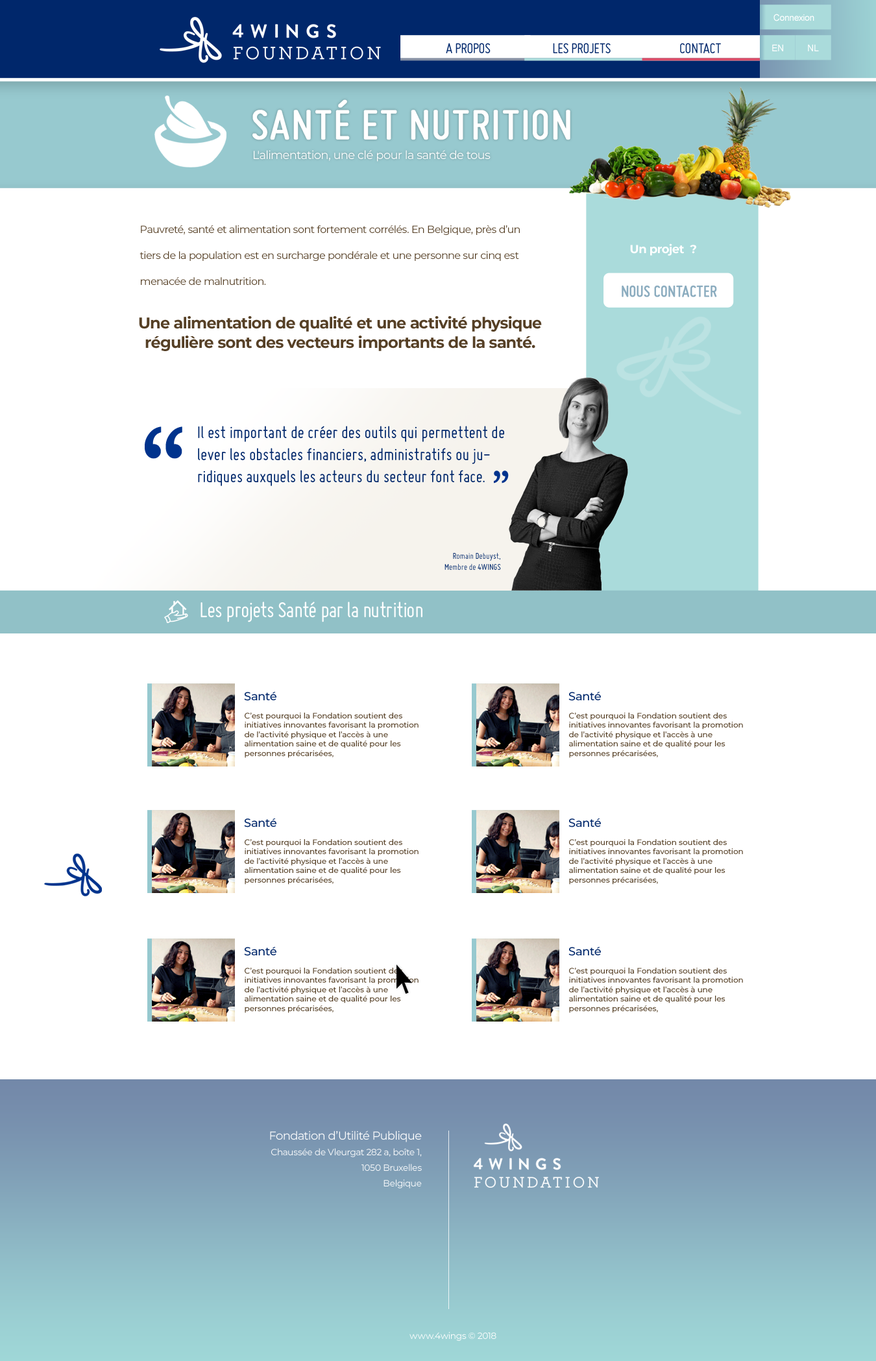
<style>
.page{position:relative;width:876px;height:1361px;background:#ffffff}
.page>*{position:absolute;margin:0}
.t1{font:9.1px "ArialMT";letter-spacing:-0.025em;color:#ffffff}
.t2{font:15.6px "Miso";letter-spacing:-0.025em;color:#00276b}
.t3{font:9.2px "ArialMT";letter-spacing:-0.025em;color:#ffffff}
.t4{font:45.4px "Miso";color:#ffffff;text-transform:uppercase;font-weight:bold}
.t5{font:11.7px "Montserrat-Regular";letter-spacing:-0.025em;color:#ffffff}
.t6{font:10.4px/26px "Montserrat-Regular";letter-spacing:-0.025em;color:#564026}
.t7{font:11.7px "Montserrat-Bold";letter-spacing:-0.025em;color:#ffffff}
.t8{font:17.3px "Miso";letter-spacing:-0.025em;color:#8bacbf;font-weight:bold}
.t9{font:15.6px/19.5px "Montserrat-Bold";letter-spacing:-0.025em;color:#564026}
.t10{font:18.2px "Miso";color:#00276b}
.t11{font:89.2px "Monaco";letter-spacing:-0.025em;color:#00338d}
.t12{font:34.5px "Monaco";letter-spacing:-0.025em;color:#00338d}
.t13{font:9.1px "Miso";color:#00276b}
.t14{font:23.4px "Miso";letter-spacing:-0.025em;color:#ffffff}
.t15{font:11.6px "Montserrat-Medium";color:#00276b}
.t16{font:7.8px "Montserrat-Medium";color:#564026}
</style>
<div class="page">
<p class="t1" style="left:774px;top:14px;width:41px;height:7px">Connexion</p>
<p class="t2" style="left:446px;top:43px;width:275px;height:10px">A PROPOS                  LES PROJETS           CONTACT</p>
<p class="t3" style="left:772px;top:44px;width:11px;height:7px">EN</p>
<p class="t3" style="left:808px;top:44px;width:11px;height:7px">NL</p>
<p class="t4" style="left:252px;top:99px;width:318px;height:41px">Santé et nutrition</p>
<p class="t5" style="left:254px;top:150px;width:237px;height:12px">L'alimentation, une clé pour la santé de tous</p>
<p class="t6" style="left:140px;top:225px;width:380px;height:60px">Pauvreté, santé et alimentation sont fortement corrélés. En Belgique, près d’un<br>tiers de la population est en surcharge pondérale et une personne sur cinq est<br>menacée de malnutrition.</p>
<p class="t7" style="left:630px;top:243px;width:66px;height:13px">Un projet  ?</p>
<p class="t8" style="left:622px;top:286px;width:95px;height:11px">NOUS CONTACTER</p>
<p class="t9" style="left:139px;top:316px;width:403px;height:35px;text-align:center">Une alimentation de qualité et une activité physique<br>régulière sont des vecteurs importants de la santé.</p>
<p class="t10" style="left:198px;top:426px;width:306px;height:60px">Il est important de créer des outils qui permettent de<br>lever les obstacles financiers, administratifs ou juridiques auxquels les acteurs du secteur font face.</p>
<p class="t11" style="left:145px;top:426px;width:37px;height:33px">“</p>
<p class="t12" style="left:494px;top:471px;width:15px;height:13px">”</p>
<p class="t13" style="left:445px;top:552px;width:56px;height:18px;text-align:right">Romain Debuyst,<br>Membre de 4WINGS</p>
<p class="t14" style="left:201px;top:602px;width:222px;height:20px">Les projets Santé par la nutrition</p>
<p class="t15" style="left:244px;top:692px;width:32px;height:9px">Santé</p>
<p class="t15" style="left:569px;top:692px;width:32px;height:9px">Santé</p>
<p class="t16" style="left:245px;top:713px;width:174px;height:45px">C’est pourquoi la Fondation soutient des<br>initiatives innovantes favorisant la promotion<br>de l’activité physique et l’accès à une<br>alimentation saine et de qualité pour les<br>personnes précarisées,</p>
<p class="t16" style="left:569px;top:713px;width:174px;height:45px">C’est pourquoi la Fondation soutient des<br>initiatives innovantes favorisant la promotion<br>de l’activité physique et l’accès à une<br>alimentation saine et de qualité pour les<br>personnes précarisées,</p>
<p class="t15" style="left:244px;top:818px;width:32px;height:9px">Santé</p>
<p class="t15" style="left:569px;top:818px;width:32px;height:9px">Santé</p>
<p class="t16" style="left:245px;top:839px;width:174px;height:46px">C’est pourquoi la Fondation soutient des<br>initiatives innovantes favorisant la promotion<br>de l’activité physique et l’accès à une<br>alimentation saine et de qualité pour les<br>personnes précarisées,</p>
<p class="t16" style="left:569px;top:839px;width:174px;height:46px">C’est pourquoi la Fondation soutient des<br>initiatives innovantes favorisant la promotion<br>de l’activité physique et l’accès à une<br>alimentation saine et de qualité pour les<br>personnes précarisées,</p>
<p class="t15" style="left:244px;top:947px;width:32px;height:9px">Santé</p>
<p class="t15" style="left:569px;top:947px;width:32px;height:9px">Santé</p>
<p class="t16" style="left:245px;top:968px;width:174px;height:45px">C’est pourquoi la Fondation soutient des<br>initiatives innovantes favorisant la promotion<br>de l’activité physique et l’accès à une<br>alimentation saine et de qualité pour les<br>personnes précarisées,</p>
<p class="t16" style="left:569px;top:968px;width:174px;height:45px">C’est pourquoi la Fondation soutient des<br>initiatives innovantes favorisant la promotion<br>de l’activité physique et l’accès à une<br>alimentation saine et de qualité pour les<br>personnes précarisées,</p>
</div>
